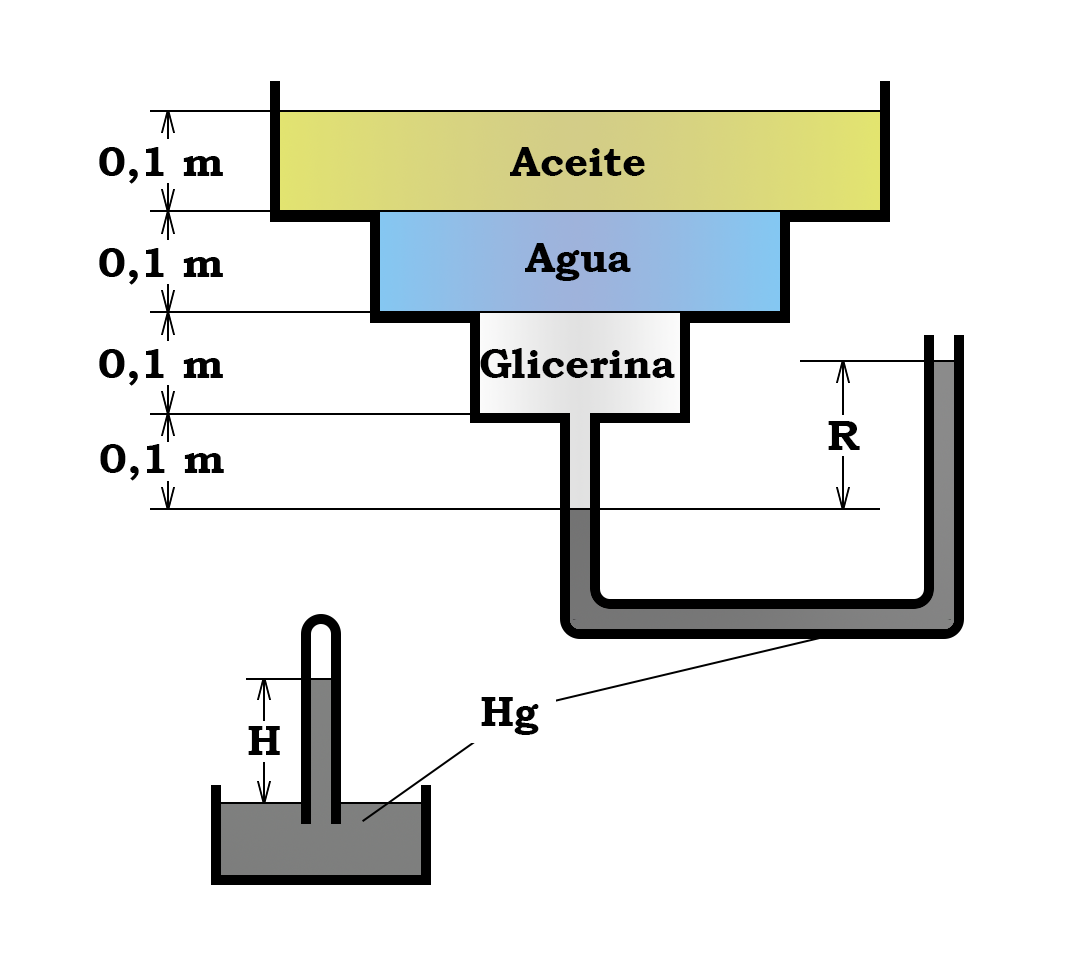
<style>
.page{position:relative;width:1080px;height:960px;background:#ffffff}
.page>*{position:absolute;margin:0}
.t1{font:41.7px "BookmanOldStyle-Bold";color:#000000}
</style>
<div class="page">
<p class="t1" style="left:510px;top:147px;width:135px;height:29px">Aceite</p>
<p class="t1" style="left:525px;top:243px;width:106px;height:38px">Agua</p>
<p class="t1" style="left:480px;top:348px;width:195px;height:30px">Glicerina</p>
<p class="t1" style="left:828px;top:421px;width:32px;height:29px">R</p>
<p class="t1" style="left:100px;top:444px;width:124px;height:37px">0,1 m</p>
<p class="t1" style="left:481px;top:697px;width:58px;height:38px">Hg</p>
<p class="t1" style="left:248px;top:726px;width:32px;height:29px">H</p>
</div>
